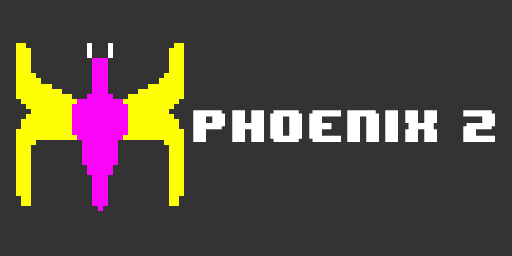
<style>
.page{position:relative;width:512px;height:256px;background:#333333}
.page>*{position:absolute;margin:0}
.t1{font:38px "8BITWONDERNominal";letter-spacing:0.01em;color:#ffffff}
</style>
<div class="page">
<p class="t1" style="left:193px;top:110px;width:302px;height:32px">PHOENIX 2</p>
</div>
